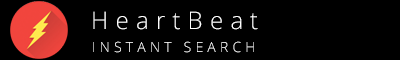
<style>
.page{position:relative;width:400px;height:60px;background:#000000}
.page>*{position:absolute;margin:0}
.t1{font:24px "OpenSans-Light";letter-spacing:0.3em;color:#ffffff}
.t2{font:14px "OpenSans-Light";letter-spacing:0.3em;color:#ffffff}
</style>
<div class="page">
<p class="t1" style="left:93px;top:11px;width:165px;height:19px">HeartBeat</p>
<p class="t2" style="left:93px;top:41px;width:161px;height:12px">INSTANT SEARCH</p>
</div>
